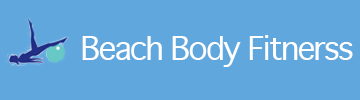
<style>
.page{position:relative;width:360px;height:100px;background:#60a7de}
.page>*{position:absolute;margin:0}
.t1{font:31.3px "Geneva";letter-spacing:-0.057em;color:#ffffff}
</style>
<div class="page">
<p class="t1" style="left:82px;top:35px;width:271px;height:32px">Beach Body Fitnerss</p>
</div>
